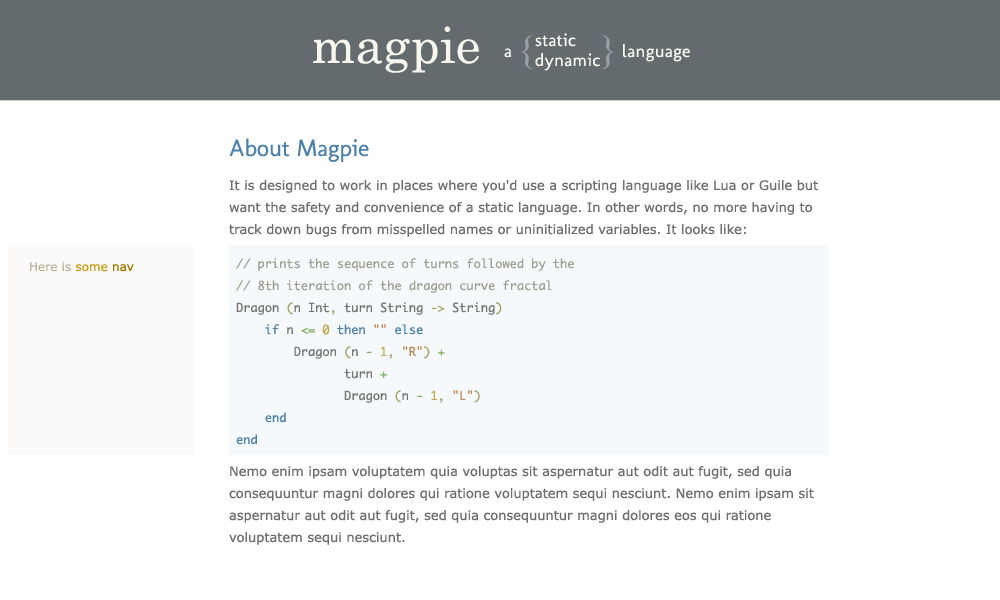
<style>
.page{position:relative;width:1000px;height:600px;background:#ffffff}
.page>*{position:absolute;margin:0}
.t1{font:50px "Century";color:#f7f7f0}
.t2{font:18px/20px "Molengo";letter-spacing:0.02em;color:#f7f7f0}
.t3{font:18px "Molengo";letter-spacing:0.02em;color:#f7f7f0}
.t4{font:24px "Molengo";color:#4b81ab}
.t5{font:13px/22px "Verdana";color:#6e6e6e}
.t6{font:12px "Verdana"}
.t7{font:12px/22px "Monaco"}
</style>
<div class="page">
<p class="t1" style="left:313px;top:26px;width:166px;height:47px">magpie</p>
<p class="t2" style="left:535px;top:33px;width:65px;height:38px">static<br>dynamic</p>
<p class="t3" style="left:504px;top:44px;width:186px;height:18px">a                    language</p>
<p class="t4" style="left:229px;top:138px;width:140px;height:24px">About Magpie</p>
<p class="t5" style="left:229px;top:180px;width:589px;height:365px">It is designed to work in places where you'd use a scripting language like Lua or Guile but<br>want the safety and convenience of a static language. In other words, no more having to<br>track down bugs from misspelled names or uninitialized variables. It looks like:<br><br><br><br><br><br><br><br><br><br><br>Nemo enim ipsam voluptatem quia voluptas sit aspernatur aut odit aut fugit, sed quia<br>consequuntur magni dolores qui ratione voluptatem sequi nesciunt. Nemo enim ipsam sit<br>aspernatur aut odit aut fugit, sed quia consequuntur magni dolores eos qui ratione<br>voluptatem sequi nesciunt.</p>
<p class="t6" style="left:30px;top:262px;width:104px;height:10px">Here is some nav</p>
<p class="t7" style="left:236px;top:258px;width:338px;height:187px">// prints the sequence of turns followed by the<br>// 8th iteration of the dragon curve fractal<br>Dragon (n Int, turn String -&gt; String)<br>    if n &lt;= 0 then "" else<br>        Dragon (n - 1, "R") +<br>               turn +<br>               Dragon (n - 1, "L")<br>    end<br>end</p>
</div>
